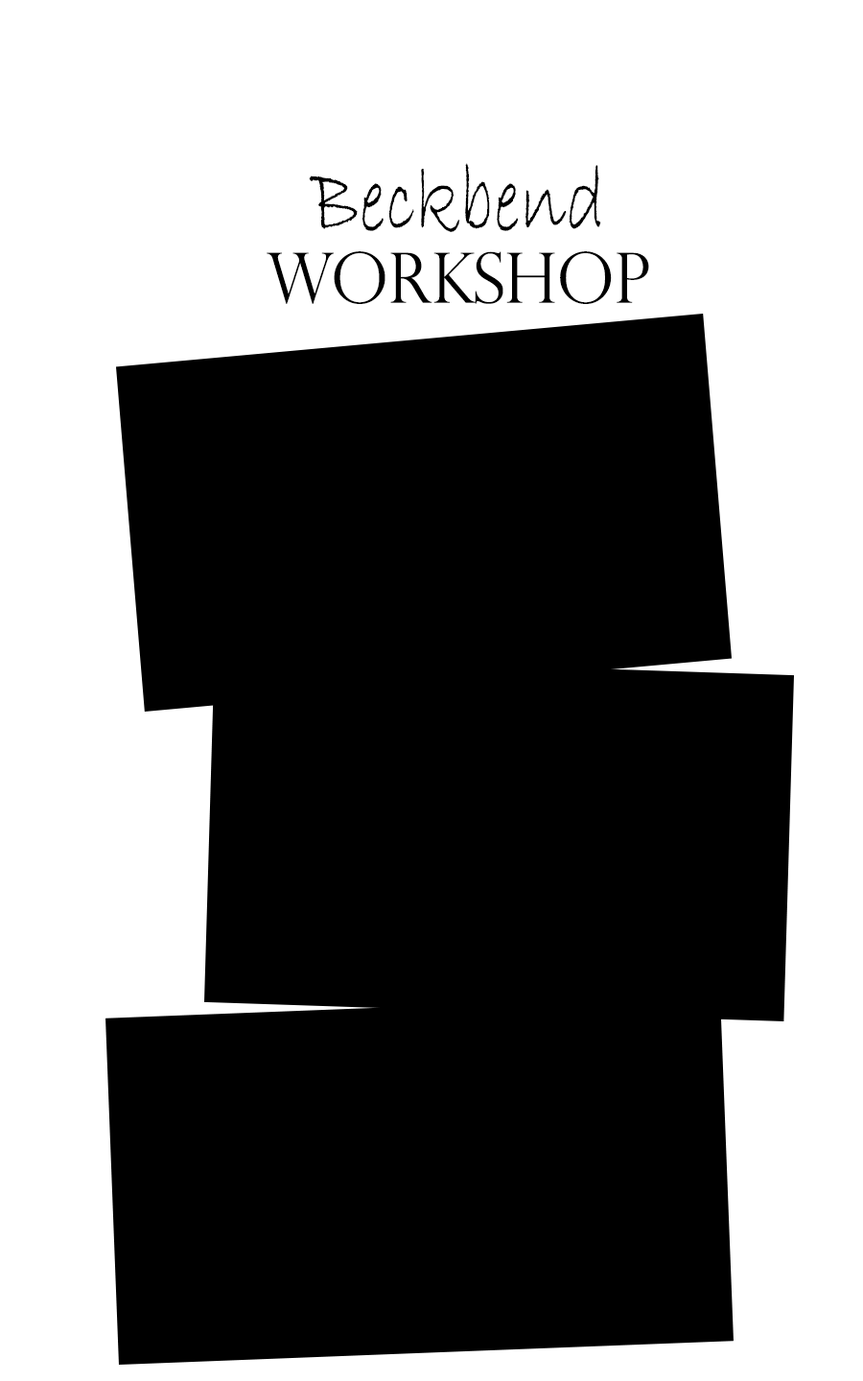
<style>
.page{position:relative;width:863px;height:1381px;background:#000000}
.page>*{position:absolute;margin:0}
.t1{font:93.3px "BradleyHandITC";color:#000000;scale:0.81 1}
.t2{font:69.1px "PerpetuaTitlingMT-Light";color:#000000}
</style>
<div class="page">
<p class="t1" style="left:309px;top:163px;width:292px;height:69px">Beckbend</p>
<p class="t2" style="left:267px;top:251px;width:382px;height:53px">workshop</p>
</div>
